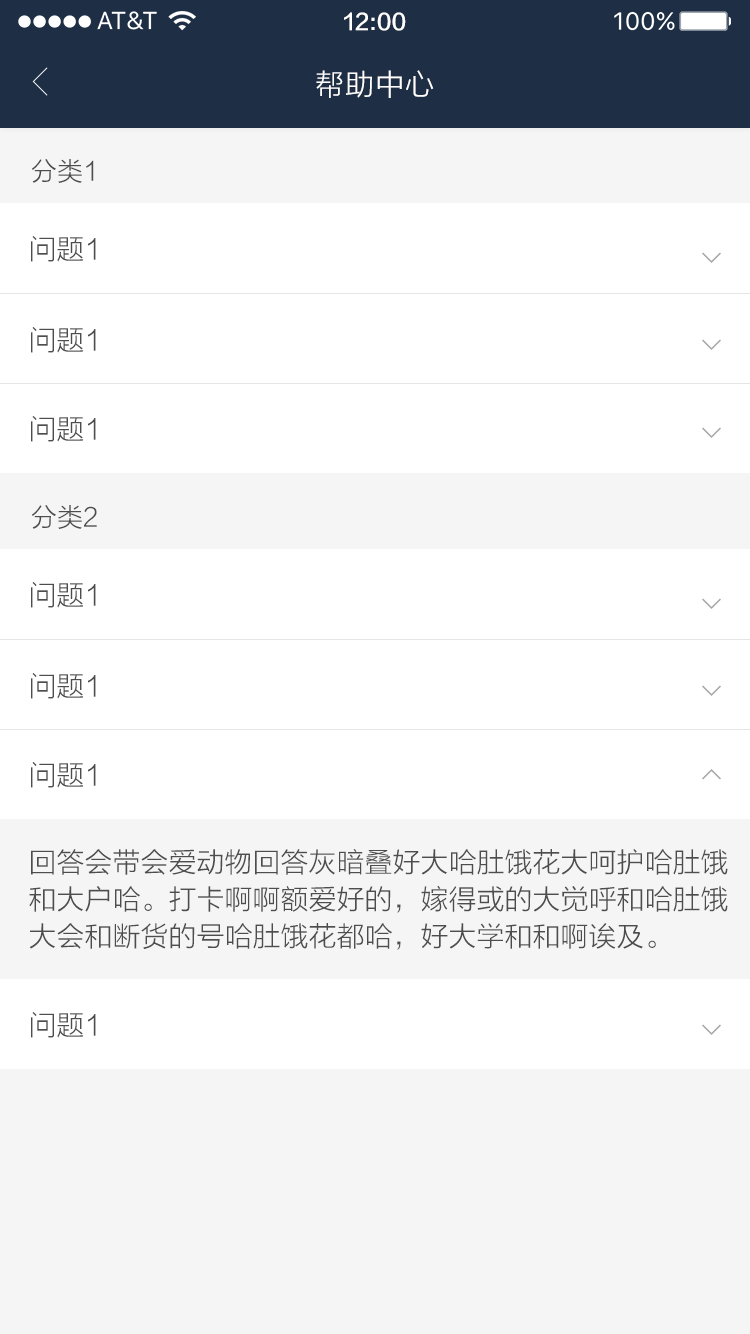
<style>
.page{position:relative;width:750px;height:1334px;background:#ffffff}
.page>*{position:absolute;margin:0}
.t1{font:22px "FZLTZHK--GBK1-0";color:#ffffff}
.t2{font:30px "FZLTXHK";color:#ffffff}
.t3{font:26px "FZLTXHK";color:#4d4d4d}
.t4{font:28px "FZLTXHK";color:#4d4d4d}
.t5{font:28px/37px "FZLTXHK";color:#4d4d4d}
</style>
<div class="page">
<p class="t1" style="left:344px;top:12px;width:62px;height:19px">12:00</p>
<p class="t2" style="left:316px;top:70px;width:118px;height:28px">帮助中心</p>
<p class="t3" style="left:32px;top:159px;width:62px;height:24px">分类1</p>
<p class="t4" style="left:31px;top:236px;width:65px;height:26px">问题1</p>
<p class="t4" style="left:31px;top:327px;width:65px;height:26px">问题1</p>
<p class="t4" style="left:31px;top:416px;width:65px;height:26px">问题1</p>
<p class="t3" style="left:32px;top:505px;width:65px;height:24px">分类2</p>
<p class="t4" style="left:31px;top:582px;width:65px;height:26px">问题1</p>
<p class="t4" style="left:31px;top:673px;width:65px;height:26px">问题1</p>
<p class="t4" style="left:31px;top:762px;width:65px;height:26px">问题1</p>
<p class="t5" style="left:29px;top:849px;width:699px;height:101px">回答会带会爱动物回答灰暗叠好大哈肚饿花大呵护哈肚饿<br>和大户哈。打卡啊啊额爱好的，嫁得或的大觉呼和哈肚饿<br>大会和断货的号哈肚饿花都哈，好大学和和啊诶及。</p>
<p class="t4" style="left:31px;top:1012px;width:65px;height:26px">问题1</p>
</div>
